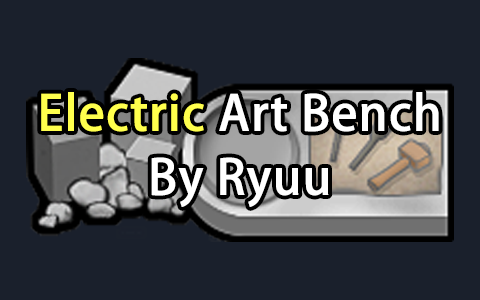
<style>
.page{position:relative;width:480px;height:300px;background:#1a202c}
.page>*{position:absolute;margin:0}
.t1{font:48px/64px "AdobeHeitiStd-Regular";color:#ffffff;font-weight:bold}
.t2{font:48px/64px "AdobeHeitiStd-Regular";color:#ffff4d;font-weight:bold}
</style>
<div class="page">
<p class="t1" style="left:41px;top:92px;width:398px;height:115px;text-align:center"><span class="t2">Electric</span> Art Bench<br>By Ryuu</p>
</div>
